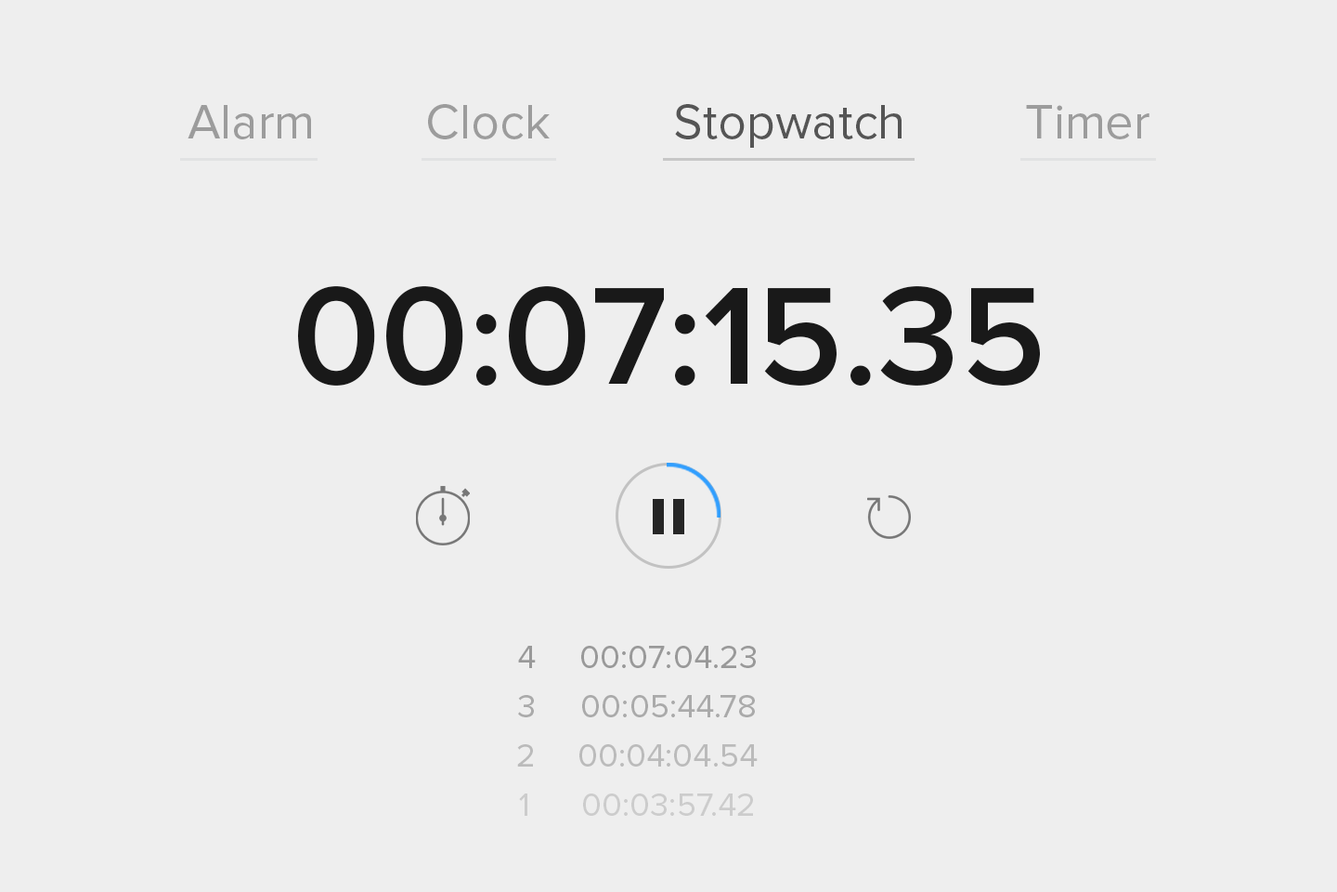
<style>
.page{position:relative;width:1337px;height:892px;background:#eeeeee}
.page>*{position:absolute;margin:0}
.t1{font:50.2px "ProximaNova-Regular";color:#9c9c9c}
.t2{font:50.2px "ProximaNova-Regular";color:#555555}
.t3{font:143px "ProximaNova-Semibold";color:#191919}
.t4{font:33.4px "ProximaNova-Regular";color:#999999}
.t5{font:33.4px "ProximaNova-Regular";color:#bbbbbb}
.t6{font:33.4px "ProximaNova-Regular";color:#cccccc}
</style>
<div class="page">
<p class="t1" style="left:188px;top:105px;width:123px;height:34px">Alarm</p>
<p class="t1" style="left:428px;top:104px;width:122px;height:35px">Clock</p>
<p class="t2" style="left:675px;top:104px;width:227px;height:44px">Stopwatch</p>
<p class="t1" style="left:1026px;top:105px;width:124px;height:34px">Timer</p>
<p class="t3" style="left:298px;top:286px;width:742px;height:99px">00:07:15.35</p>
<p class="t4" style="left:518px;top:645px;width:18px;height:23px">4</p>
<p class="t4" style="left:581px;top:645px;width:175px;height:23px">00:07:04.23</p>
<p class="t4" style="left:518px;top:695px;width:16px;height:22px">3</p>
<p class="t4" style="left:582px;top:695px;width:173px;height:22px">00:05:44.78</p>
<p class="t5" style="left:517px;top:744px;width:16px;height:22px">2</p>
<p class="t5" style="left:580px;top:744px;width:178px;height:22px">00:04:04.54</p>
<p class="t6" style="left:519px;top:793px;width:9px;height:22px">1</p>
<p class="t6" style="left:583px;top:793px;width:170px;height:22px">00:03:57.42</p>
</div>
